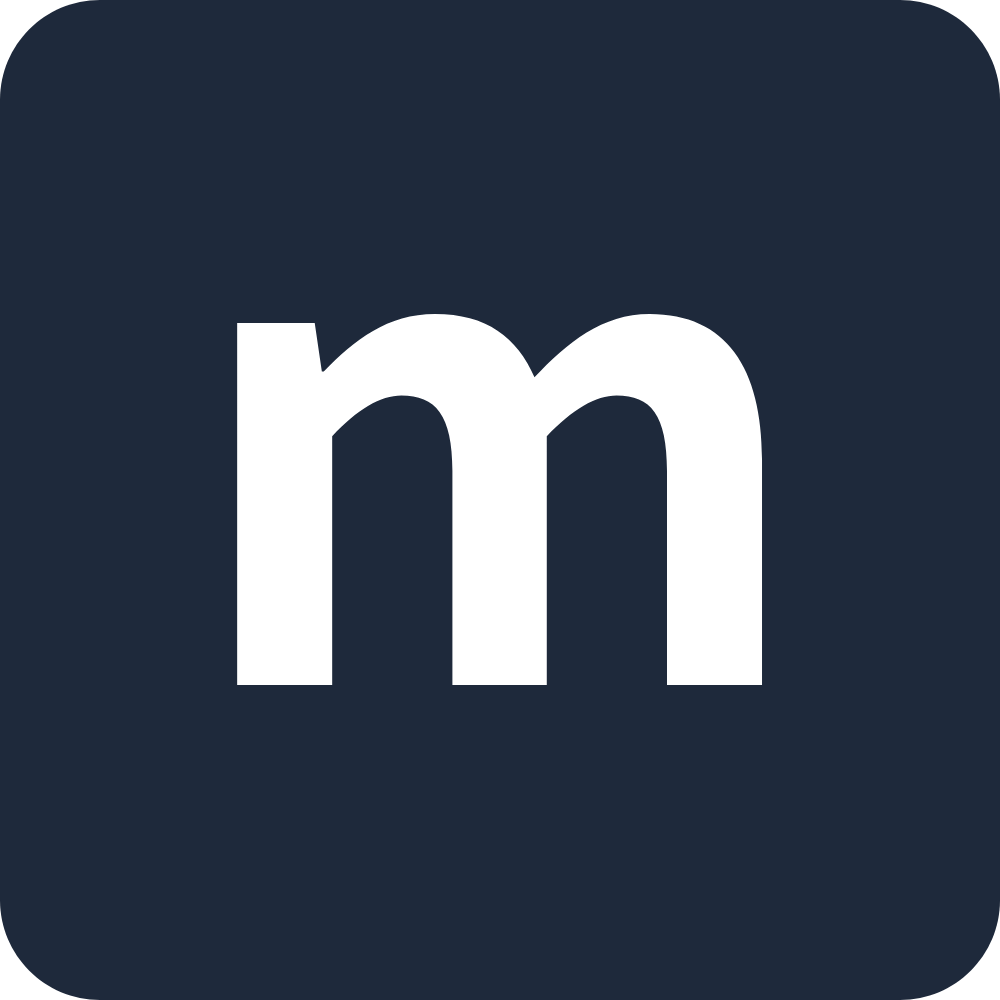
<style>
.page{position:relative;width:1000px;height:1000px;background:#1e293b}
.page>*{position:absolute;margin:0}
.t1{font:646.4px "NotoSansKR-Bold";color:#ffffff}
</style>
<div class="page">
<p class="t1" style="left:237px;top:314px;width:526px;height:371px">m</p>
</div>
